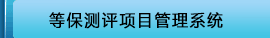
<style>
.page{position:relative;width:270px;height:38px}
.page>*{position:absolute;margin:0}
.t1{font:16.2px "MicrosoftYaHei";letter-spacing:0.1em;color:#000000;font-weight:bold;scale:0.96 1}
</style>
<div class="page">
<p class="t1" style="left:49px;top:12px;width:174px;height:17px">等保测评项目管理系统</p>
</div>
